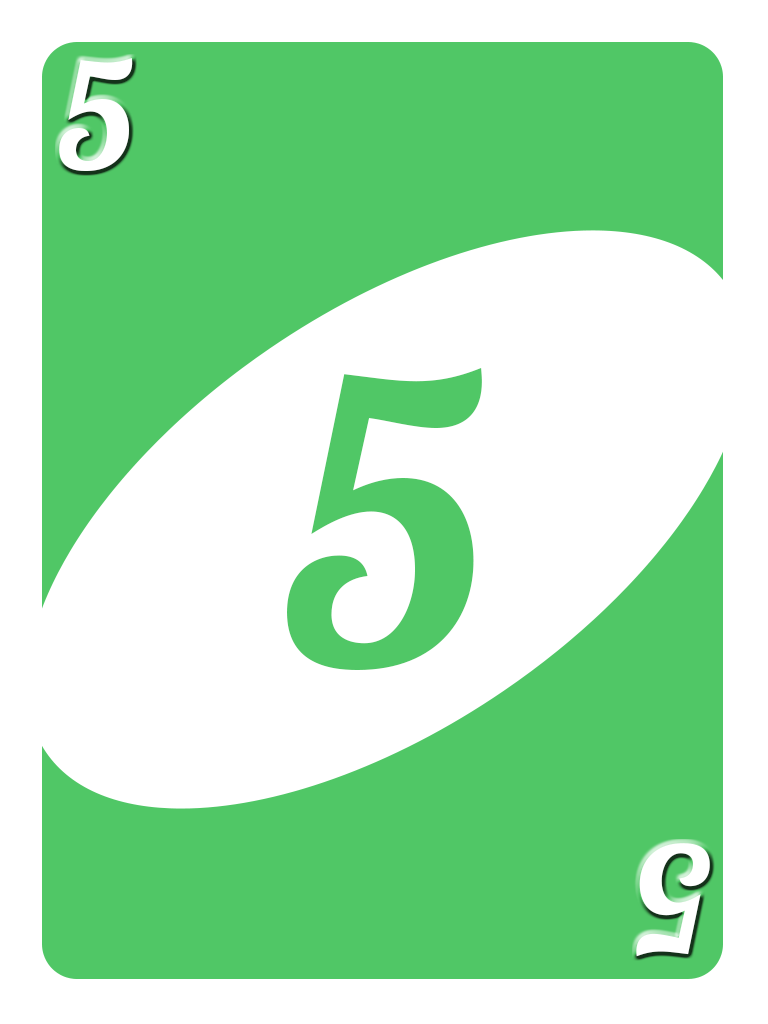
<style>
.page{position:relative;width:768px;height:1024px;background:#ffffff}
.page>*{position:absolute;margin:0}
.t1{font:150px "Lobster1.4";color:#ffffff}
.t2{font:400.1px "Lobster1.4";color:#50c766}
</style>
<div class="page">
<p class="t1" style="left:59px;top:58px;width:74px;height:113px">5</p>
<p class="t2" style="left:287px;top:368px;width:195px;height:302px">5</p>
<p class="t1" style="left:636px;top:843px;width:74px;height:114px;rotate:-180deg">5</p>
</div>
